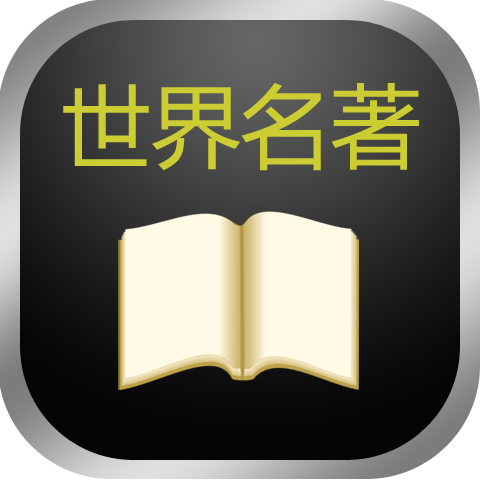
<style>
.page{position:relative;width:480px;height:480px}
.page>*{position:absolute;margin:0}
.t1{font:90px "MicrosoftYaHei";color:#cccc33}
</style>
<div class="page">
<p class="t1" style="left:63px;top:83px;width:356px;height:88px">世界名著</p>
</div>
